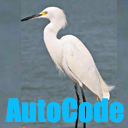
<style>
.page{position:relative;width:128px;height:128px}
.page>*{position:absolute;margin:0}
.t1{font:30px "Impact";color:#08bdf9}
</style>
<div class="page">
<p class="t1" style="left:5px;top:97px;width:119px;height:26px">AutoCode</p>
</div>
